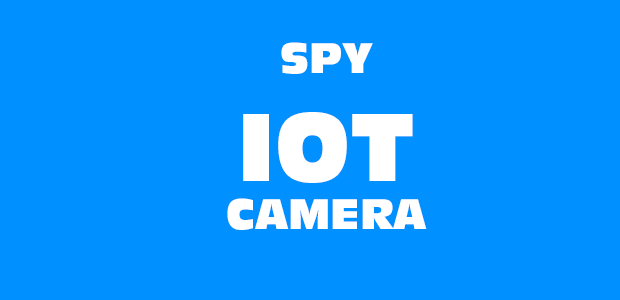
<style>
.page{position:relative;width:620px;height:300px;background:#0090ff}
.page>*{position:absolute;margin:0}
.t1{font:40px "Incised901BT-Compact";color:#ffffff}
.t2{font:90px "Incised901BT-Compact";color:#ffffff}
</style>
<div class="page">
<p class="t1" style="left:227px;top:42px;width:200px;height:188px;text-align:center">SPY<br><span class="t2">IOT<br></span>CAMERA</p>
</div>
